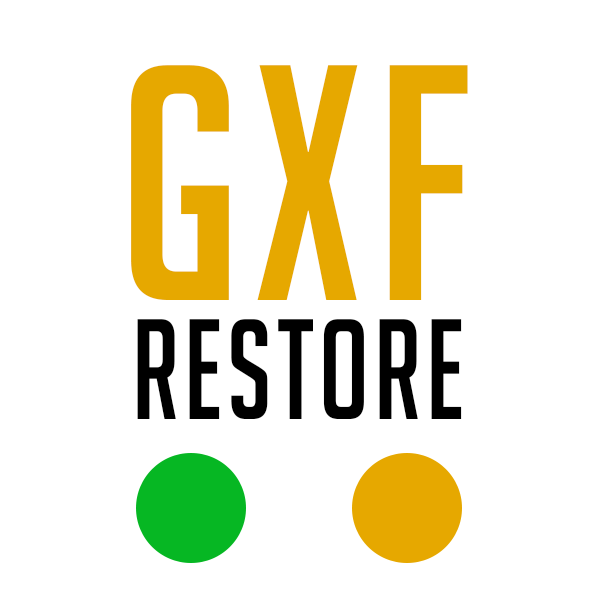
<style>
.page{position:relative;width:600px;height:600px;background:#ffffff}
.page>*{position:absolute;margin:0}
.t1{font:327.5px "BigNoodleTitling";letter-spacing:0.04em;color:#e6a800}
.t2{font:138.8px "BigNoodleTitling";letter-spacing:0.04em;color:#000000;scale:0.9 1}
</style>
<div class="page">
<p class="t1" style="left:131px;top:65px;width:337px;height:235px">GXF</p>
<p class="t2" style="left:137px;top:319px;width:325px;height:100px">RESTORE</p>
</div>
